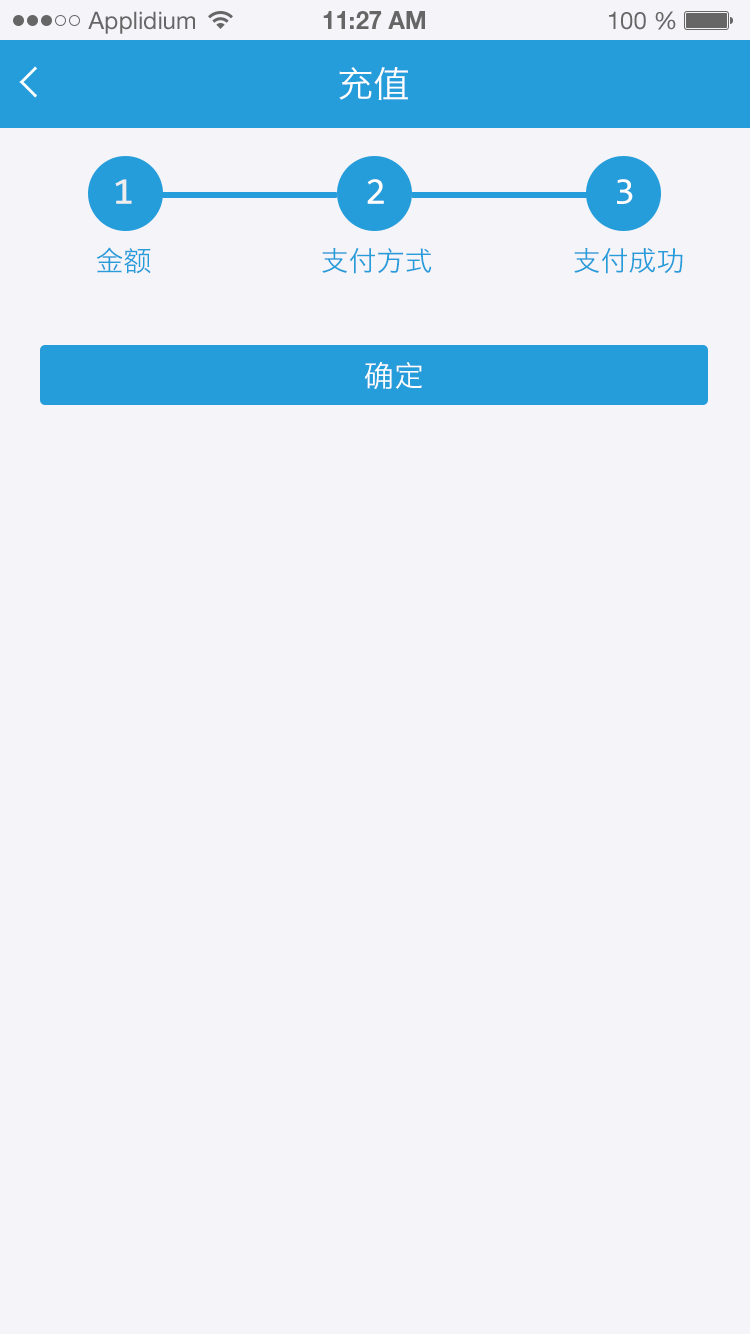
<style>
.page{position:relative;width:750px;height:1334px;background:#f5f4f9}
.page>*{position:absolute;margin:0}
.t1{font:24px "HelveticaNeueLTStd-Roman";color:#666666}
.t2{font:24px "HelveticaNeueLTStd-Bd";color:#666666}
.t3{font:36px "HiraginoSansGB-W3";color:#ffffff;text-transform:uppercase}
.t4{font:38px "Consolas";color:#eeeeee;text-transform:uppercase}
.t5{font:38px "Consolas";color:#ffffff;text-transform:uppercase}
.t6{font:28px "HiraginoSansGB-W3";color:#259dda;text-transform:uppercase}
.t7{font:30px "HiraginoSansGB-W3";color:#ffffff;text-transform:uppercase}
</style>
<div class="page">
<p class="t1" style="left:88px;top:11px;width:107px;height:23px">Applidium</p>
<p class="t2" style="left:323px;top:11px;width:102px;height:18px">11:27 AM</p>
<p class="t1" style="left:609px;top:11px;width:67px;height:19px">100 %</p>
<p class="t3" style="left:339px;top:67px;width:69px;height:33px">充值</p>
<p class="t4" style="left:115px;top:179px;width:17px;height:25px">1</p>
<p class="t5" style="left:367px;top:179px;width:17px;height:25px">2</p>
<p class="t5" style="left:617px;top:179px;width:16px;height:25px">3</p>
<p class="t6" style="left:96px;top:247px;width:55px;height:27px">金额</p>
<p class="t6" style="left:322px;top:248px;width:110px;height:26px">支付方式</p>
<p class="t6" style="left:574px;top:247px;width:109px;height:27px">支付成功</p>
<p class="t7" style="left:364px;top:362px;width:58px;height:27px">确定</p>
</div>
